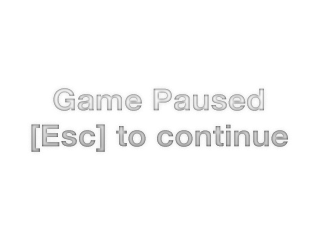
<style>
.page{position:relative;width:320px;height:240px;background:#ffffff}
.page>*{position:absolute;margin:0}
.t1{font:30px "HelveticaNeue-Bold";scale:1.07 1}
</style>
<div class="page">
<p class="t1" style="left:31px;top:88px;width:257px;height:64px;text-align:center">Game Paused<br>[Esc] to continue</p>
</div>
